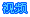
<style>
.page{position:relative;width:30px;height:17px;background:#ffffff}
.page>*{position:absolute;margin:0}
.t1{font:11px "MicrosoftYaHei";letter-spacing:0.1em;color:#50c9fc}
</style>
<div class="page">
<p class="t1" style="left:3px;top:3px;width:24px;height:10px">视频</p>
</div>
